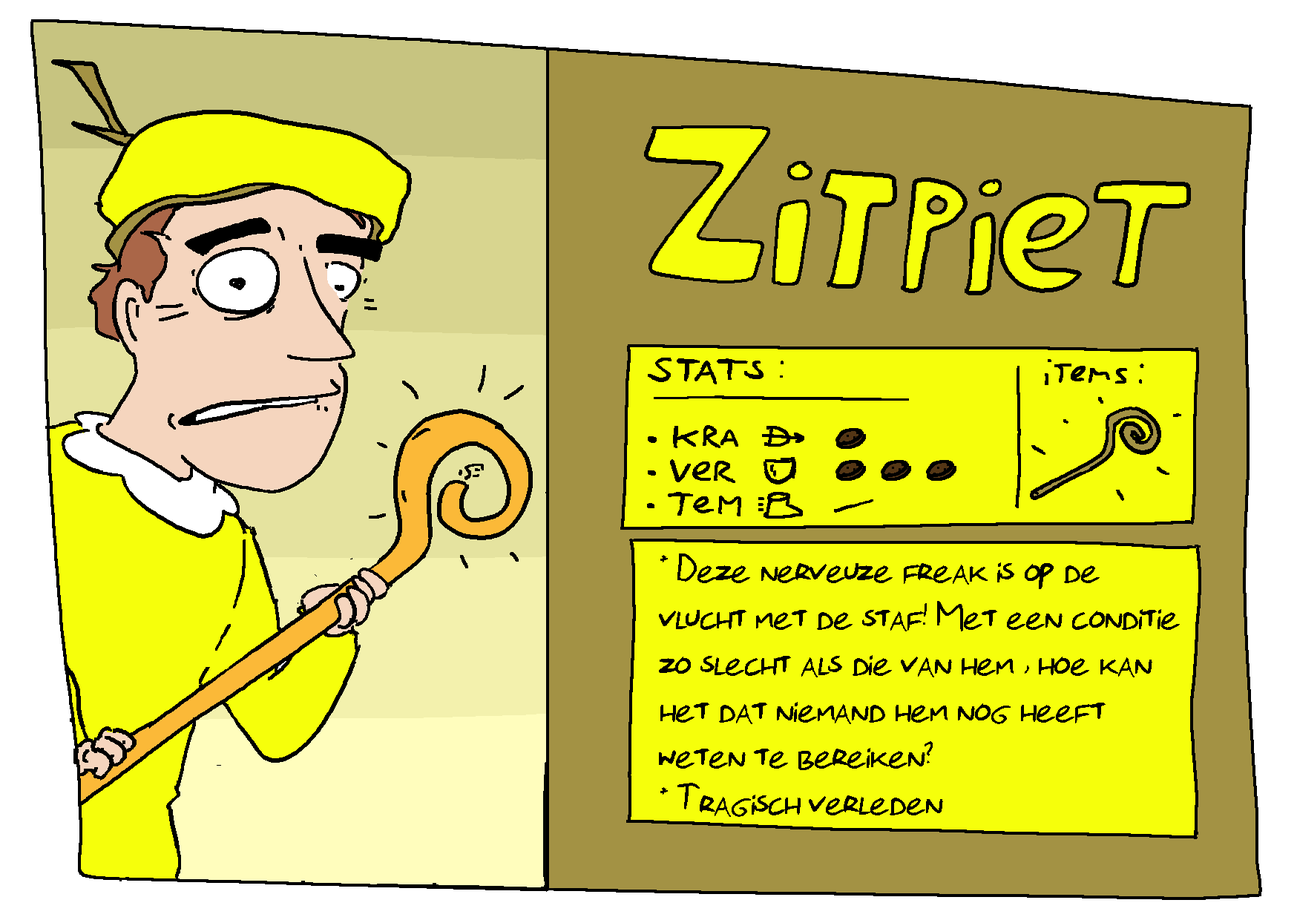
<style>
.page{position:relative;width:1297px;height:920px;background:#f6ff0b}
.page>*{position:absolute;margin:0}
.t1{font:40.2px/46.4px "Florisfont2-Regular";color:#000000}
</style>
<div class="page">
<p class="t1" style="left:659px;top:553px;width:520px;height:264px">* Deze nerveuze freak is op de<br>vlucht met de staf! Met een conditie<br>zo slecht als die van hem , hoe kan <br>het dat niemand hem nog heeft <br>weten te bereiken?<br>* Tragisch verleden</p>
</div>
